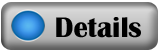
<style>
.page{position:relative;width:159px;height:52px}
.page>*{position:absolute;margin:0}
.t1{font:29.2px "BritannicBold";color:#000000}
</style>
<div class="page">
<p class="t1" style="left:56px;top:17px;width:85px;height:21px">Details</p>
</div>
